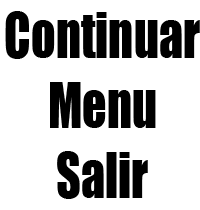
<style>
.page{position:relative;width:200px;height:210px;background:#ffffff}
.page>*{position:absolute;margin:0}
.t1{font:58.4px "Impact";color:#000000;scale:0.82 1}
</style>
<div class="page">
<p class="t1" style="left:5px;top:11px;width:195px;height:188px;text-align:center">Continuar<br>Menu<br>Salir</p>
</div>
